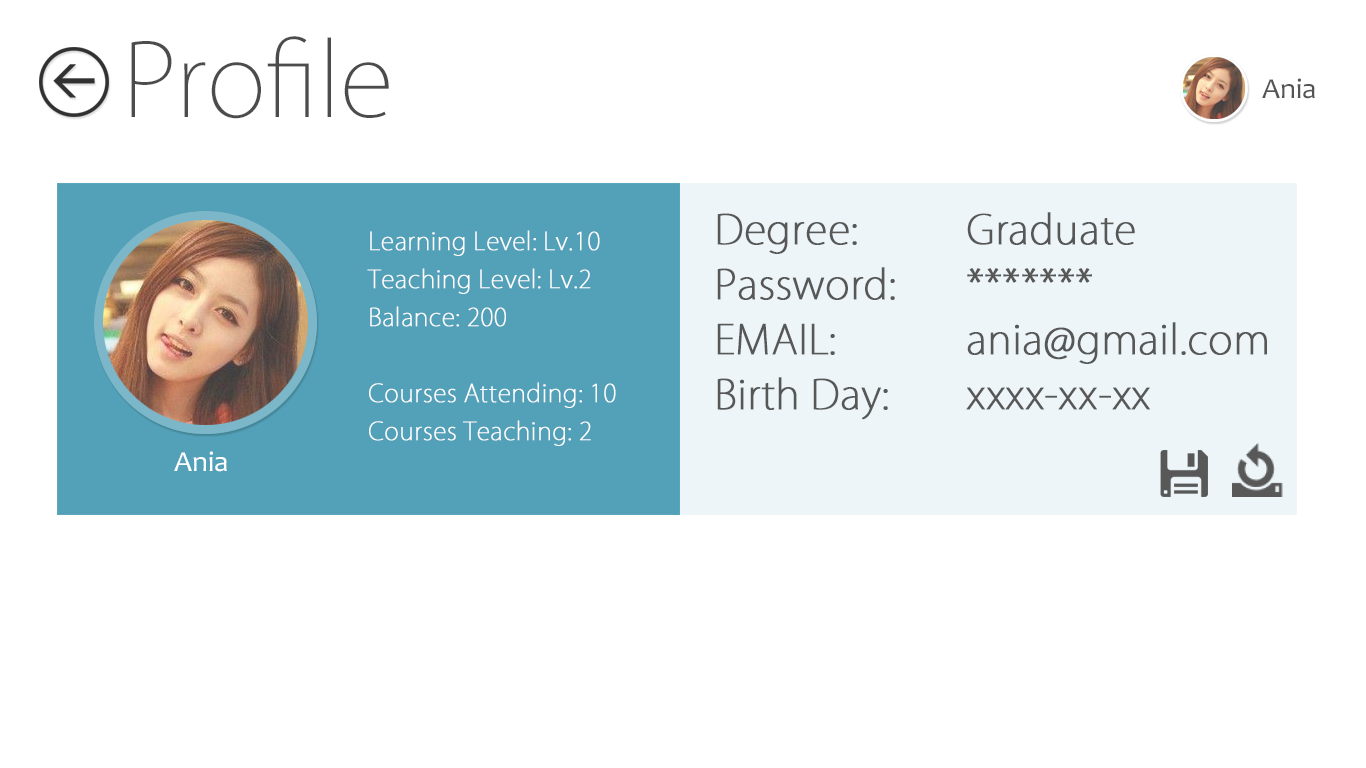
<style>
.page{position:relative;width:1366px;height:768px;background:#ffffff}
.page>*{position:absolute;margin:0}
.t1{font:100px "KozGoPr6N-ExtraLight";color:#4c4c4c}
.t2{font:29.2px "Candara";color:#545454}
.t3{font:40px/55px "KozGoPr6N-ExtraLight";color:#575757;font-weight:bold}
.t4{font:24.4px/38.1px "KozGoPr6N-ExtraLight";color:#ffffff;font-weight:bold}
.t5{font:29.2px "Candara";color:#ffffff}
</style>
<div class="page">
<p class="t1" style="left:131px;top:36px;width:258px;height:83px">Profile</p>
<p class="t2" style="left:1262px;top:78px;width:53px;height:21px">Ania</p>
<p class="t3" style="left:717px;top:212px;width:550px;height:208px">Degree:   Graduate<br>Password:    *******<br>EMAIL:      ania@gmail.com<br>Birth Day:   xxxx-xx-xx</p>
<p class="t4" style="left:367px;top:230px;width:249px;height:216px">Learning Level: Lv.10<br>Teaching Level: Lv.2<br>Balance: 200<br><br>Courses Attending: 10<br>Courses Teaching: 2</p>
<p class="t5" style="left:174px;top:451px;width:53px;height:21px">Ania</p>
</div>
